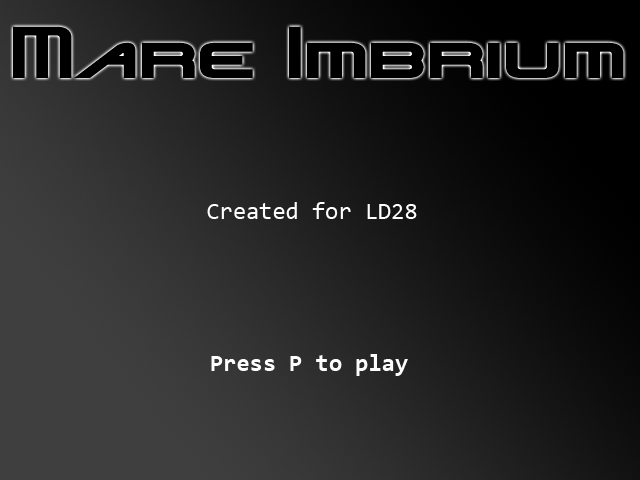
<style>
.page{position:relative;width:640px;height:480px}
.page>*{position:absolute;margin:0}
.t1{font:60px "NiseJSRF";color:#000000}
.t2{font:24px "Consolas";color:#fffeff}
.t3{font:24px "Consolas-Bold";color:#fffeff}
</style>
<div class="page">
<p class="t1" style="left:13px;top:26px;width:611px;height:52px">Mare Imbrium</p>
<p class="t2" style="left:207px;top:202px;width:210px;height:17px">Created for LD28</p>
<p class="t3" style="left:211px;top:354px;width:197px;height:22px">Press P to play</p>
</div>
